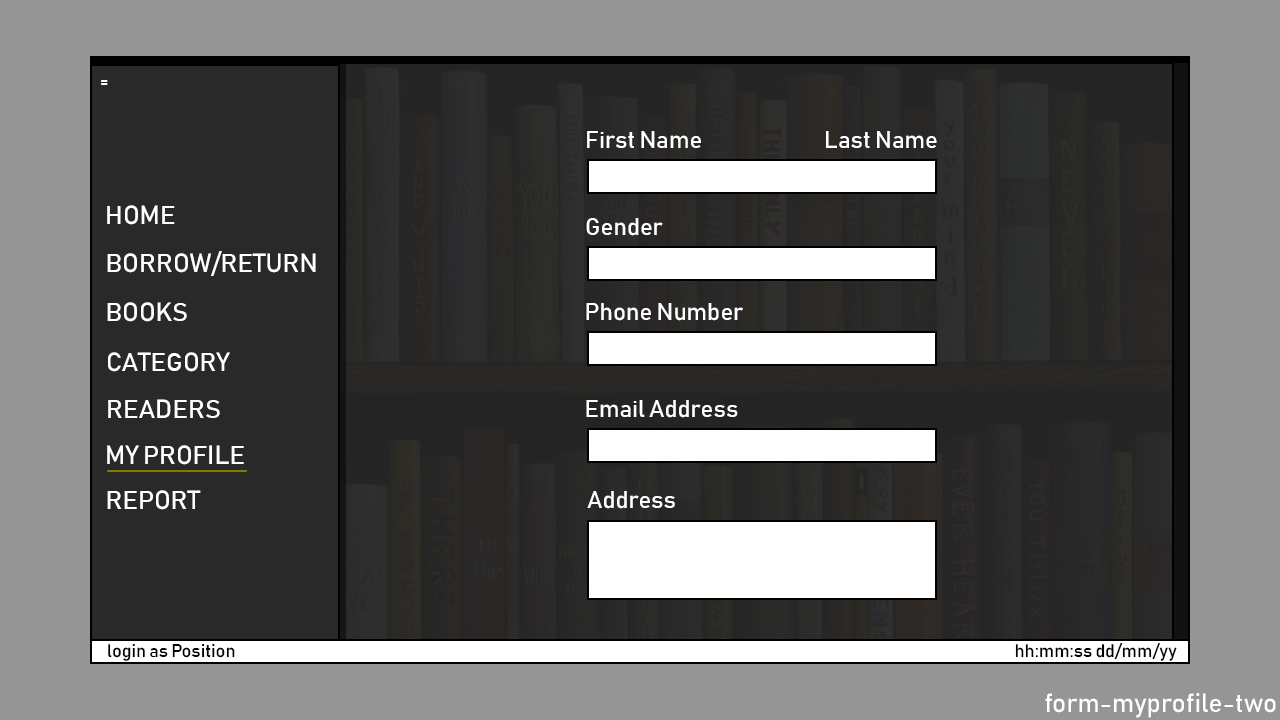
<style>
.page{position:relative;width:1280px;height:720px;background:#959595}
.page>*{position:absolute;margin:0}
.t1{font:18px "Bahnschrift";color:#ffffff}
.t2{font:24px "Bahnschrift";color:#ffffff}
.t3{font:26px "Bahnschrift";color:#ffffff}
.t4{font:18px "Bahnschrift";color:#000000}
.t5{font:26px "Bahnschrift";color:#fefefe}
</style>
<div class="page">
<p class="t1" style="left:101px;top:80px;width:7px;height:5px">=</p>
<p class="t2" style="left:587px;top:131px;width:114px;height:17px">First Name</p>
<p class="t2" style="left:826px;top:131px;width:111px;height:17px">Last Name</p>
<p class="t3" style="left:107px;top:205px;width:68px;height:20px">HOME</p>
<p class="t2" style="left:586px;top:218px;width:77px;height:18px">Gender</p>
<p class="t3" style="left:107px;top:251px;width:209px;height:25px">BORROW/RETURN</p>
<p class="t3" style="left:107px;top:302px;width:80px;height:20px">BOOKS</p>
<p class="t2" style="left:586px;top:303px;width:157px;height:18px">Phone Number</p>
<p class="t3" style="left:108px;top:352px;width:122px;height:20px">CATEGORY</p>
<p class="t3" style="left:108px;top:399px;width:112px;height:19px">READERS</p>
<p class="t2" style="left:586px;top:400px;width:152px;height:18px">Email Address</p>
<p class="t3" style="left:107px;top:445px;width:137px;height:20px">MY PROFILE</p>
<p class="t3" style="left:107px;top:490px;width:94px;height:20px">REPORT</p>
<p class="t2" style="left:587px;top:491px;width:88px;height:18px">Address</p>
<p class="t4" style="left:108px;top:644px;width:127px;height:17px">login as Position</p>
<p class="t4" style="left:1015px;top:643px;width:162px;height:18px">hh:mm:ss dd/mm/yy</p>
<p class="t5" style="left:1045px;top:693px;width:231px;height:25px">form-myprofile-two</p>
</div>
